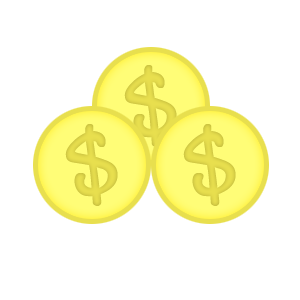
<style>
.page{position:relative;width:300px;height:300px;background:#ffffff}
.page>*{position:absolute;margin:0}
.t1{font:100px "Andy-Bold";color:#e3da4c}
.t2{font:100px "Andy-Bold";color:#e2d94b}
</style>
<div class="page">
<p class="t1" style="left:124px;top:65px;width:53px;height:82px">$</p>
<p class="t2" style="left:65px;top:124px;width:53px;height:82px">$</p>
<p class="t2" style="left:183px;top:124px;width:53px;height:82px">$</p>
</div>
